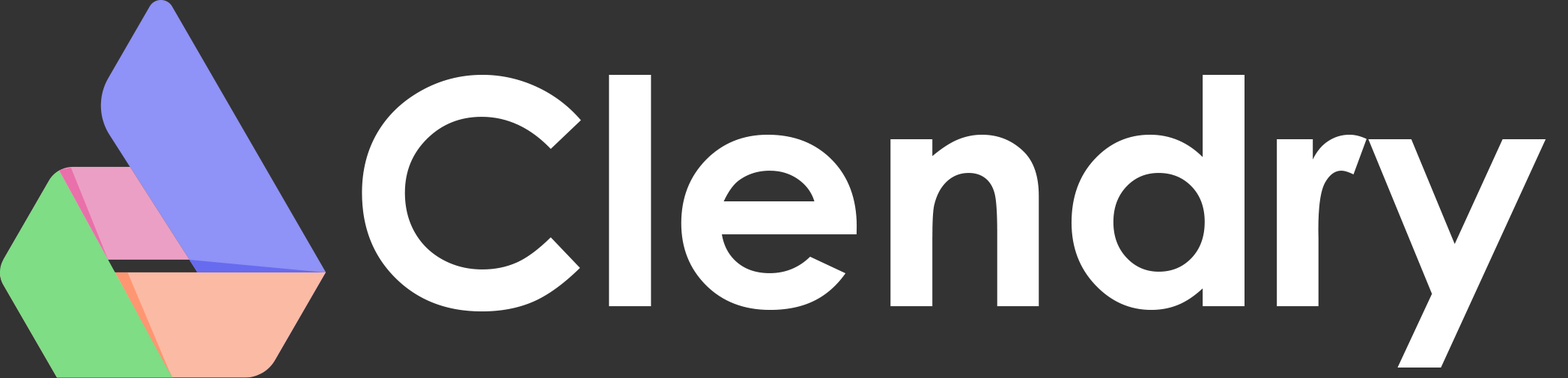
<style>
.page{position:relative;width:1568px;height:378px;background:#333333}
.page>*{position:absolute;margin:0}
.t1{font:314.5px "CenturyGothic-Bold";color:#ffffff}
</style>
<div class="page">
<p class="t1" style="left:362px;top:75px;width:1184px;height:293px">Clendry</p>
</div>
